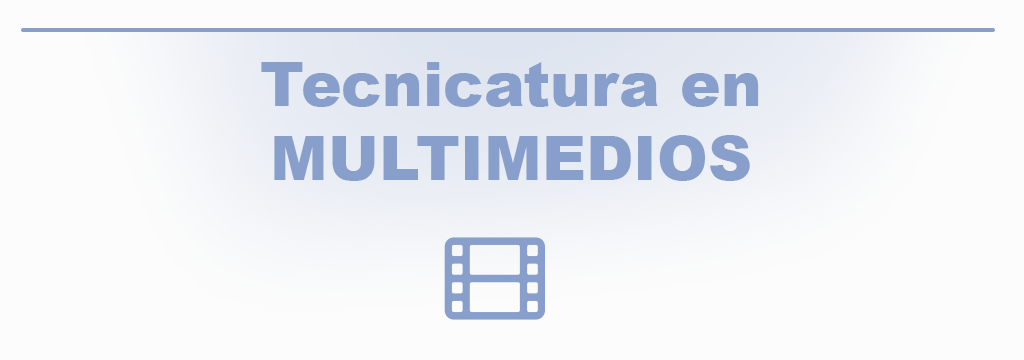
<style>
.page{position:relative;width:1024px;height:360px;background:#fcfcfc}
.page>*{position:absolute;margin:0}
.t1{font:61px "Arial-Black";color:#889fcb}
</style>
<div class="page">
<p class="t1" style="left:261px;top:62px;width:498px;height:119px;text-align:center">Tecnicatura en<br>MULTIMEDIOS</p>
</div>
